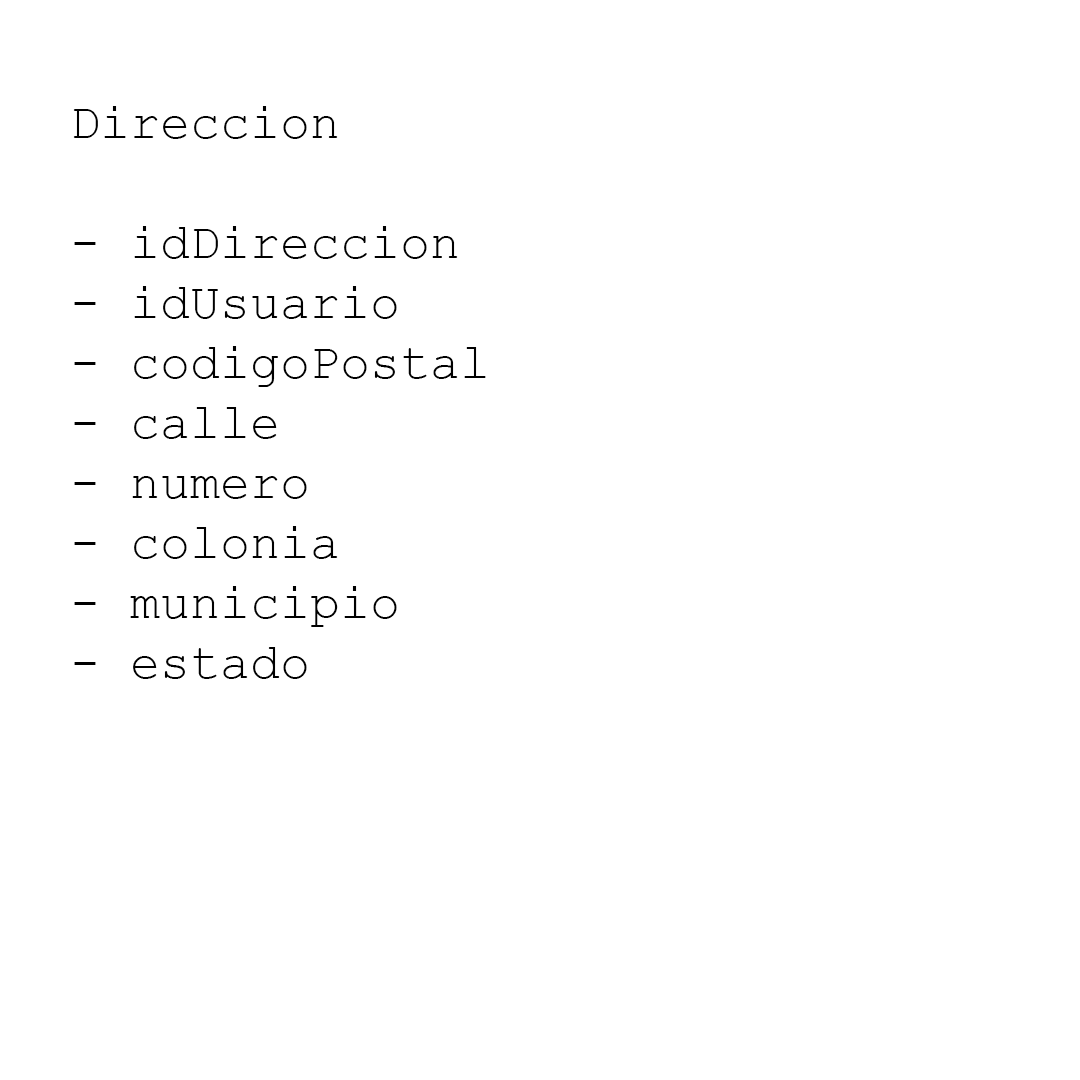
<style>
.page{position:relative;width:1080px;height:1080px;background:#ffffff}
.page>*{position:absolute;margin:0}
.t1{font:50px "CourierNewPSMT";color:#000000}
</style>
<div class="page">
<p class="t1" style="left:73px;top:106px;width:413px;height:573px">Direccion<br><br>- idDireccion<br>- idUsuario<br>- codigoPostal <br>- calle<br>- numero<br>- colonia<br>- municipio<br>- estado</p>
</div>
